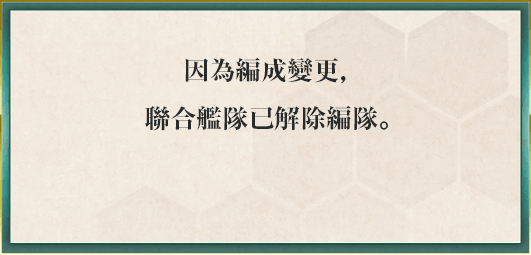
<style>
.page{position:relative;width:531px;height:255px}
.page>*{position:absolute;margin:0}
.t1{font:26px/24px "RyuminPr6N-ExBold";color:#292a2a}
</style>
<div class="page">
<p class="t1" style="left:145px;top:57px;width:243px;height:74px;text-align:center">因為編成變更，<br><br>聯合艦隊已解除編隊。</p>
</div>
